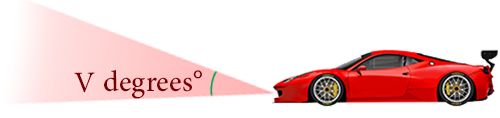
<style>
.page{position:relative;width:500px;height:118px;background:#ffffff}
.page>*{position:absolute;margin:0}
.t1{font:7.5px "AdobeArabic-Regular";color:#780000}
</style>
<div class="page">
<p class="t1" style="left:74px;top:69px;width:128px;height:30px;rotate:-1deg">V degrees°</p>
</div>
